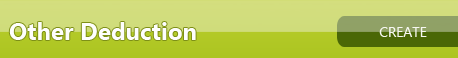
<style>
.page{position:relative;width:458px;height:58px}
.page>*{position:absolute;margin:0}
.t1{font:24px "SegoeUI-Bold";color:#fefefe}
.t2{font:14px "SegoeUI";color:#f6f7f1}
</style>
<div class="page">
<p class="t1" style="left:9px;top:22px;width:187px;height:18px">Other Deduction</p>
<p class="t2" style="left:379px;top:27px;width:48px;height:10px">CREATE</p>
</div>
